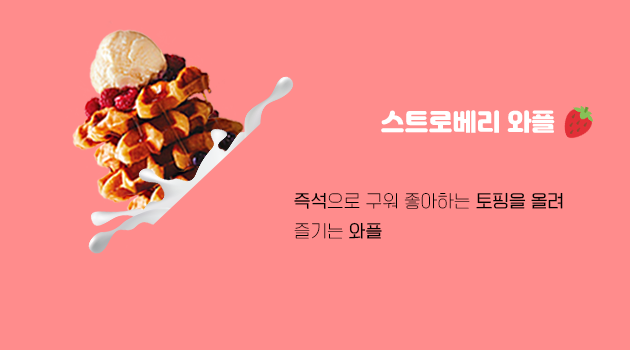
<style>
.page{position:relative;width:630px;height:350px;background:#ff8c8c}
.page>*{position:absolute;margin:0}
.t1{font:24px "Jalnan";color:#ffffff}
.t2{font:17px/30px "TTOmniGothicT";color:#000000}
.t3{font:17px/30px "TTOmniGothicM";color:#000000}
</style>
<div class="page">
<p class="t1" style="left:381px;top:110px;width:174px;height:23px">스트로베리 와플</p>
<p class="t2" style="left:294px;top:192px;width:269px;height:47px"><span class="t3">즉석</span>으로 구워 좋아하는 <span class="t3">토핑을 올려</span> <br>즐기는 <span class="t3">와플</span></p>
</div>
